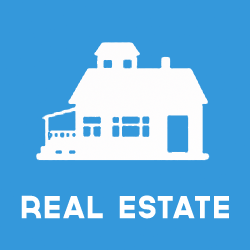
<style>
.page{position:relative;width:250px;height:250px;background:#3498db}
.page>*{position:absolute;margin:0}
.t1{font:30px "Governor";color:#ffffff}
</style>
<div class="page">
<p class="t1" style="left:21px;top:195px;width:208px;height:24px">REAL ESTATE</p>
</div>
